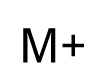
<style>
.page{position:relative;width:105px;height:83px;background:#ffffff}
.page>*{position:absolute;margin:0}
.t1{font:47.9px "DroidSans";color:#000000}
</style>
<div class="page">
<p class="t1" style="left:23px;top:28px;width:61px;height:35px">M+</p>
</div>
